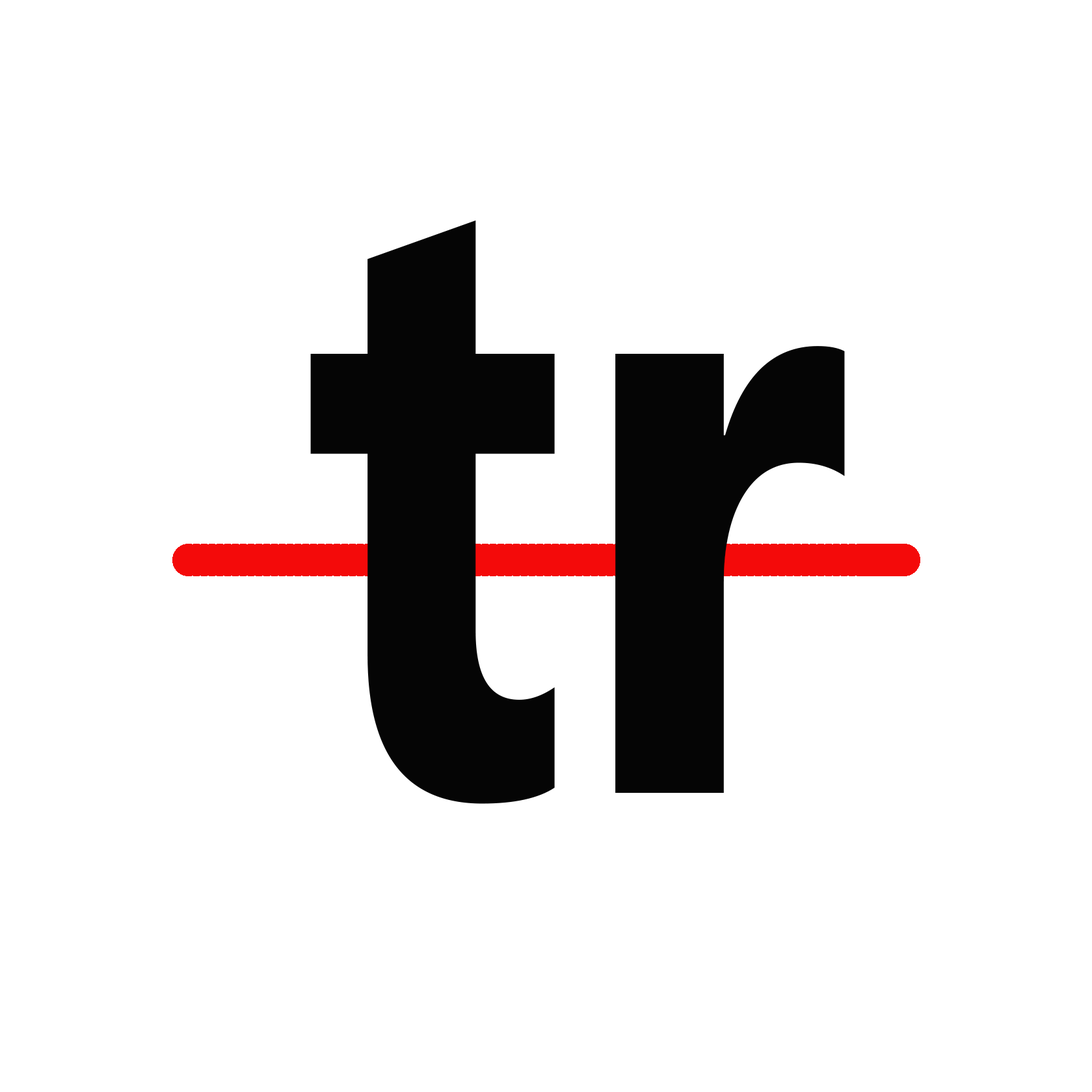
<style>
.page{position:relative;width:1092px;height:1092px;background:#ffffff}
.page>*{position:absolute;margin:0}
.t1{font:878.1px "Ebrima-Bold";color:#050505;scale:0.8 1}
</style>
<div class="page">
<p class="t1" style="left:310px;top:220px;width:535px;height:584px">tr</p>
</div>
